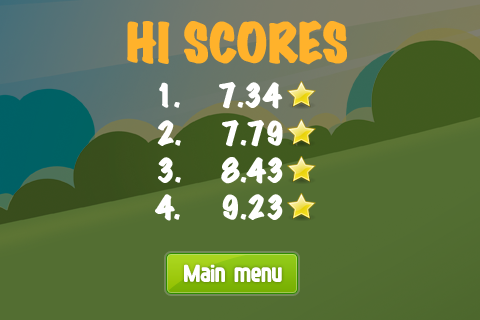
<style>
.page{position:relative;width:480px;height:320px;background:#536e32}
.page>*{position:absolute;margin:0}
.t1{font:48.2px "MarkerFelt-Wide";color:#ffb22b;font-weight:bold}
.t2{font:28.1px "MarkerFelt-Wide";color:#ffffff;font-weight:bold}
.t3{font:22px "FontopoFONTOPO";color:#ffffff}
</style>
<div class="page">
<p class="t1" style="left:127px;top:20px;width:220px;height:45px">HI SCORES</p>
<p class="t2" style="left:159px;top:82px;width:21px;height:26px">1.</p>
<p class="t2" style="left:219px;top:82px;width:64px;height:27px">7.34</p>
<p class="t2" style="left:157px;top:120px;width:24px;height:26px">2.</p>
<p class="t2" style="left:222px;top:120px;width:61px;height:27px">7.79</p>
<p class="t2" style="left:158px;top:157px;width:23px;height:26px">3.</p>
<p class="t2" style="left:221px;top:157px;width:62px;height:27px">8.43</p>
<p class="t2" style="left:155px;top:194px;width:25px;height:27px">4.</p>
<p class="t2" style="left:222px;top:194px;width:61px;height:26px">9.23</p>
<p class="t3" style="left:184px;top:264px;width:98px;height:18px">Main menu</p>
</div>
